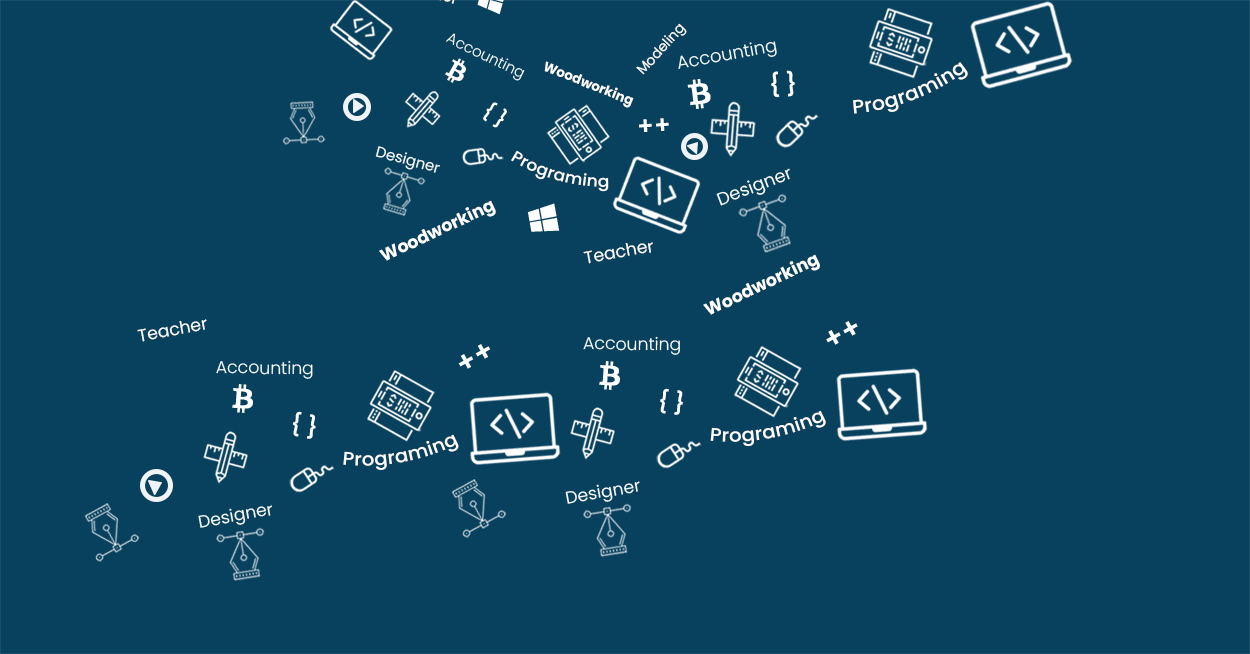
<style>
.page{position:relative;width:1250px;height:654px;background:#08415e}
.page>*{position:absolute;margin:0}
.t1{font:13.8px "Poppins-Regular";color:#ffffff}
.t2{font:14.9px "Poppins-Light";color:#ffffff}
.t3{font:17.8px "Poppins-Light";color:#ffffff}
.t4{font:13.3px "Poppins-Bold";color:#ffffff}
.t5{font:19.1px "Poppins-Medium";color:#ffffff}
.t6{font:22.7px "Poppins-SemiBold";color:#ffffff}
.t7{font:19px "Poppins-SemiBold";color:#ffffff}
.t8{font:24.9px "Poppins-SemiBold";color:#ffffff}
.t9{font:14.9px "Poppins-Regular";color:#ffffff}
.t10{font:16px "Poppins-Medium";color:#ffffff}
.t11{font:17.8px "Poppins-Regular";color:#ffffff}
.t12{font:17.3px "Poppins-Bold";color:#ffffff}
.t13{font:17.3px "Poppins-Regular";color:#ffffff}
.t14{font:28.8px "Poppins-SemiBold";color:#ffffff}
.t15{font:17.3px "Poppins-Light";color:#ffffff}
.t16{font:22px "Poppins-SemiBold";color:#ffffff}
.t17{font:18.4px "Poppins-Medium";color:#ffffff}
</style>
<div class="page">
<p class="t1" style="left:636px;top:23px;width:51px;height:52px;rotate:-48deg">Modeling</p>
<p class="t2" style="left:446px;top:33px;width:79px;height:48px;rotate:26deg">Accounting</p>
<p class="t3" style="left:678px;top:41px;width:99px;height:28px;rotate:-10deg">Accounting</p>
<p class="t4" style="left:544px;top:61px;width:90px;height:47px;rotate:22deg">Woodworking</p>
<p class="t5" style="left:853px;top:62px;width:115px;height:52px;rotate:-21deg">Programing</p>
<p class="t6" style="left:771px;top:70px;width:24px;height:28px;rotate:-3deg">{ }</p>
<p class="t7" style="left:483px;top:102px;width:24px;height:26px;rotate:33deg">{ }</p>
<p class="t8" style="left:639px;top:118px;width:30px;height:14px;rotate:-4deg">++</p>
<p class="t9" style="left:375px;top:146px;width:65px;height:27px;rotate:15deg">Designer</p>
<p class="t10" style="left:511px;top:150px;width:98px;height:42px;rotate:15deg">Programing</p>
<p class="t11" style="left:716px;top:168px;width:74px;height:38px;rotate:-21deg">Designer</p>
<p class="t12" style="left:379px;top:200px;width:117px;height:61px;rotate:-26deg">Woodworking</p>
<p class="t13" style="left:583px;top:242px;width:70px;height:22px;rotate:-10deg">Teacher</p>
<p class="t12" style="left:703px;top:254px;width:117px;height:61px;rotate:-26deg">Woodworking</p>
<p class="t13" style="left:137px;top:319px;width:70px;height:23px;rotate:-10deg">Teacher</p>
<p class="t14" style="left:826px;top:321px;width:32px;height:24px;rotate:-29deg">++</p>
<p class="t15" style="left:583px;top:336px;width:97px;height:19px">Accounting</p>
<p class="t14" style="left:458px;top:344px;width:33px;height:25px;rotate:-29deg">++</p>
<p class="t15" style="left:216px;top:360px;width:97px;height:19px">Accounting</p>
<p class="t16" style="left:660px;top:388px;width:23px;height:27px;rotate:8deg">{ }</p>
<p class="t16" style="left:292px;top:411px;width:24px;height:28px;rotate:8deg">{ }</p>
<p class="t17" style="left:710px;top:410px;width:116px;height:36px;rotate:-10deg">Programing</p>
<p class="t17" style="left:343px;top:434px;width:116px;height:36px;rotate:-10deg">Programing</p>
<p class="t13" style="left:565px;top:481px;width:75px;height:23px;rotate:-10deg">Designer</p>
<p class="t13" style="left:198px;top:505px;width:74px;height:23px;rotate:-10deg">Designer</p>
</div>
